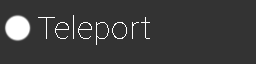
<style>
.page{position:relative;width:256px;height:64px;background:#333333}
.page>*{position:absolute;margin:0}
.t1{font:32px "Roboto-Thin";color:#ffffff}
</style>
<div class="page">
<p class="t1" style="left:38px;top:15px;width:112px;height:30px">Teleport</p>
</div>
